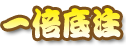
<style>
.page{position:relative;width:126px;height:48px;background:#ffffff}
.page>*{position:absolute;margin:0}
.t1{font:31.9px "TKanTingLiu-Ultra";scale:0.95 1}
</style>
<div class="page">
<p class="t1" style="left:3px;top:8px;width:118px;height:31px">一倍底注</p>
</div>
